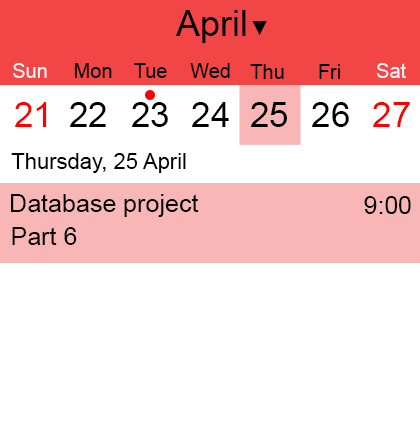
<style>
.page{position:relative;width:420px;height:445px;background:#ffffff}
.page>*{position:absolute;margin:0}
.t1{font:36px "ArialMT";color:#000000}
.t2{font:21px "ArialMT";color:#000000}
.t3{font:20px "ArialMT";color:#edf1f3}
.t4{font:20px "ArialMT";color:#000000}
.t5{font:20px "ArialMT";color:#010000}
.t6{font:35px "ArialMT";color:#ff0000}
.t7{font:35px "ArialMT";color:#000000}
.t8{font:22px "ArialMT";color:#000000}
.t9{font:25px "ArialMT";color:#000000}
</style>
<div class="page">
<p class="t1" style="left:176px;top:10px;width:70px;height:33px">April</p>
<p class="t2" style="left:252px;top:21px;width:15px;height:14px">▼</p>
<p class="t3" style="left:13px;top:63px;width:34px;height:15px">Sun</p>
<p class="t4" style="left:74px;top:63px;width:38px;height:15px">Mon</p>
<p class="t4" style="left:134px;top:63px;width:33px;height:15px">Tue</p>
<p class="t4" style="left:190px;top:63px;width:40px;height:15px">Wed</p>
<p class="t4" style="left:250px;top:64px;width:34px;height:15px">Thu</p>
<p class="t5" style="left:319px;top:64px;width:21px;height:15px">Fri</p>
<p class="t3" style="left:376px;top:63px;width:30px;height:15px">Sat</p>
<p class="t6" style="left:15px;top:102px;width:32px;height:25px">21</p>
<p class="t7" style="left:70px;top:102px;width:36px;height:25px">22</p>
<p class="t7" style="left:132px;top:102px;width:36px;height:25px">23</p>
<p class="t7" style="left:192px;top:102px;width:37px;height:25px">24</p>
<p class="t7" style="left:251px;top:102px;width:36px;height:25px">25</p>
<p class="t7" style="left:312px;top:102px;width:37px;height:25px">26</p>
<p class="t6" style="left:373px;top:102px;width:37px;height:25px">27</p>
<p class="t8" style="left:11px;top:153px;width:175px;height:20px">Thursday, 25 April</p>
<p class="t9" style="left:11px;top:194px;width:188px;height:23px">Database project</p>
<p class="t9" style="left:364px;top:196px;width:47px;height:18px">9:00</p>
<p class="t9" style="left:12px;top:227px;width:65px;height:18px">Part 6</p>
</div>
